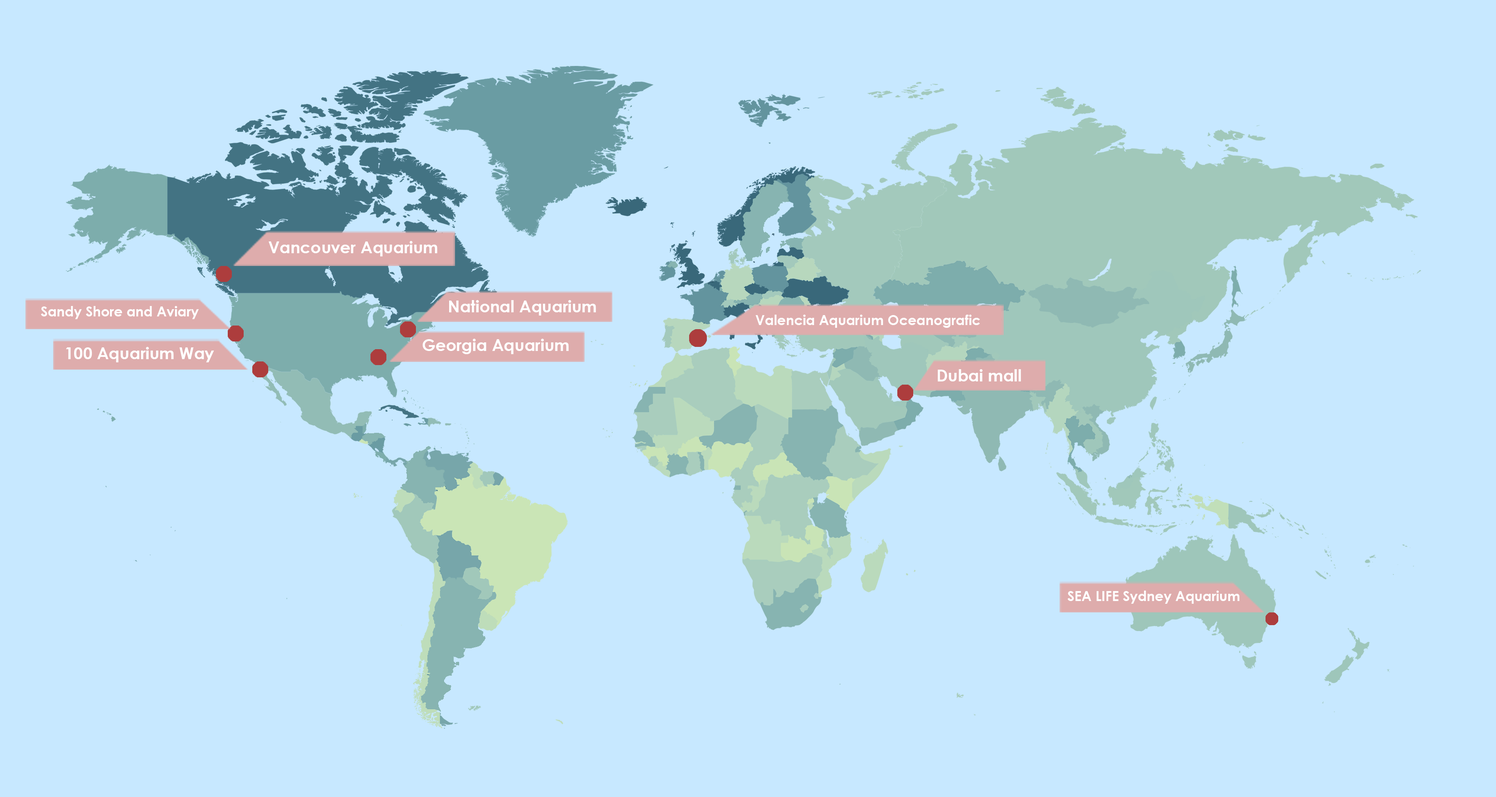
<style>
.page{position:relative;width:1496px;height:797px;background:#c7e8ff}
.page>*{position:absolute;margin:0}
.t1{font:16.4px "CenturyGothic-Bold";color:#ffffff}
.t2{font:13.6px "CenturyGothic-Bold";color:#ffffff}
</style>
<div class="page">
<p class="t1" style="left:269px;top:241px;width:168px;height:15px">Vancouver Aquarium</p>
<p class="t2" style="left:41px;top:306px;width:158px;height:13px">Sandy Shore and Aviary</p>
<p class="t1" style="left:449px;top:300px;width:147px;height:16px">National Aquarium</p>
<p class="t2" style="left:756px;top:315px;width:224px;height:13px">Valencia Aquarium Oceanografic</p>
<p class="t1" style="left:422px;top:339px;width:147px;height:15px">Georgia Aquarium</p>
<p class="t1" style="left:66px;top:347px;width:148px;height:15px">100 Aquarium Way</p>
<p class="t1" style="left:938px;top:369px;width:83px;height:12px">Dubai mall</p>
<p class="t2" style="left:1067px;top:591px;width:173px;height:13px">SEA LIFE Sydney Aquarium</p>
</div>
